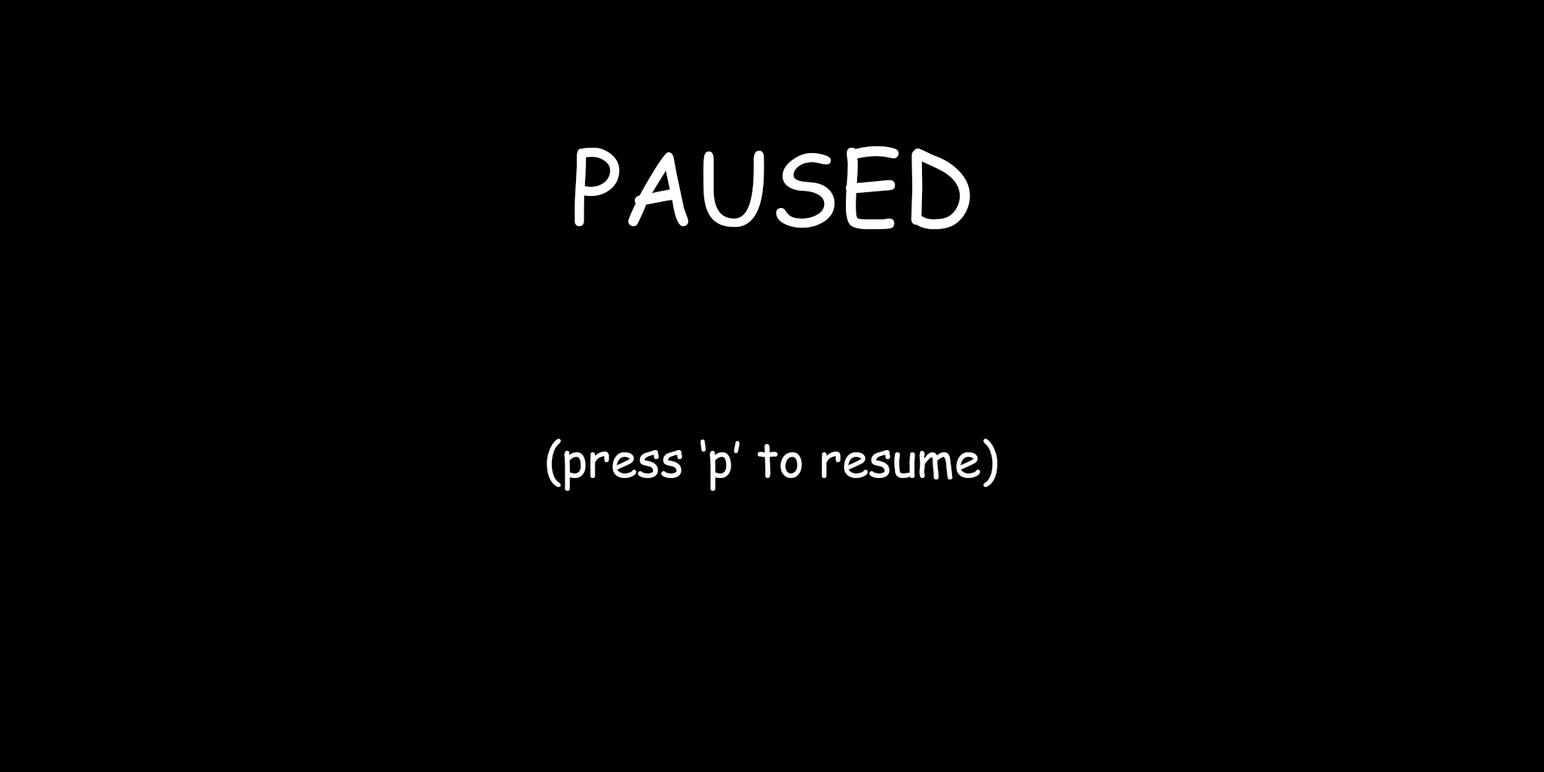
<style>
.page{position:relative;width:1544px;height:772px;background:#000000}
.page>*{position:absolute;margin:0}
.t1{font:100.5px "ComicSansMS";color:#ffffff}
.t2{font:48.3px "ComicSansMS";color:#ffffff}
</style>
<div class="page">
<p class="t1" style="left:575px;top:146px;width:395px;height:83px">PAUSED</p>
<p class="t2" style="left:547px;top:439px;width:451px;height:52px">(press ‘p’ to resume)</p>
</div>
